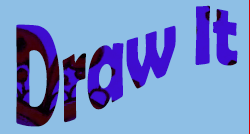
<style>
.page{position:relative;width:250px;height:134px;background:#8ebfe5}
.page>*{position:absolute;margin:0}
.t1{font:115.6px "BerlinSansFBDemi-Bold";letter-spacing:-0.005em;scale:0.58 1}
</style>
<div class="page">
<p class="t1" style="left:16px;top:5px;width:222px;height:122px">Draw It</p>
</div>
